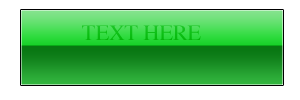
<style>
.page{position:relative;width:300px;height:100px;background:#ffffff}
.page>*{position:absolute;margin:0}
.t1{font:22px "Times-Roman";color:#0dc015}
</style>
<div class="page">
<p class="t1" style="left:82px;top:25px;width:119px;height:15px">TEXT HERE</p>
</div>
